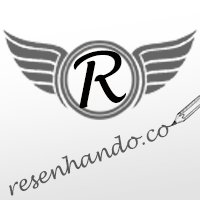
<style>
.page{position:relative;width:200px;height:200px}
.page>*{position:absolute;margin:0}
.t1{font:71.1px "LucidaHandwriting-Italic";color:#030000}
.t2{font:20.8px "LucidaHandwriting-Italic";color:#5b5959}
</style>
<div class="page">
<p class="t1" style="left:73px;top:50px;width:53px;height:59px">R</p>
<p class="t2" style="left:8px;top:124px;width:165px;height:72px;rotate:-21deg">resenhando.co</p>
</div>
